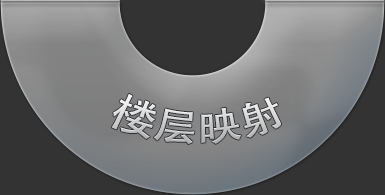
<style>
.page{position:relative;width:385px;height:195px;background:#333333}
.page>*{position:absolute;margin:0}
.t1{font:37.5px "AdobeHeitiStd-Regular"}
</style>
<div class="page">
<p class="t1" style="left:111px;top:93px;width:170px;height:51px">楼层映射</p>
</div>
